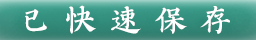
<style>
.page{position:relative;width:256px;height:40px}
.page>*{position:absolute;margin:0}
.t1{font:32px "AaYZQDBTBNon-CommercialUse";letter-spacing:0.4em;color:#ffffff}
</style>
<div class="page">
<p class="t1" style="left:25px;top:5px;width:205px;height:29px">已快速保存</p>
</div>
